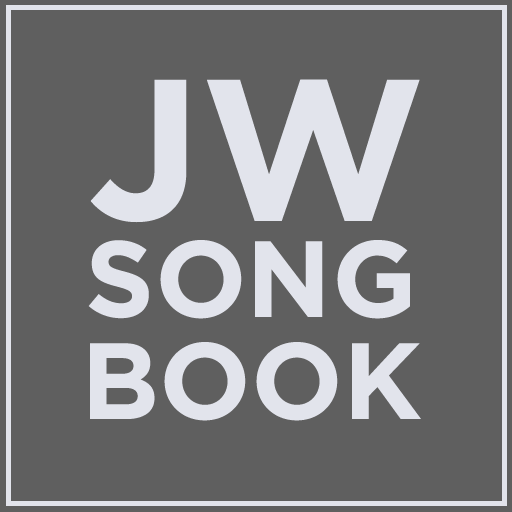
<style>
.page{position:relative;width:512px;height:512px;background:#5f5f5f}
.page>*{position:absolute;margin:0}
.t1{font:200px "Gotham-Bold";color:#e2e4ec}
.t2{font:108px "Gotham-Bold";color:#e2e4ec}
</style>
<div class="page">
<p class="t1" style="left:90px;top:79px;width:330px;height:144px">JW</p>
<p class="t2" style="left:88px;top:240px;width:322px;height:79px">SONG</p>
<p class="t2" style="left:90px;top:342px;width:331px;height:79px">BOOK</p>
</div>
